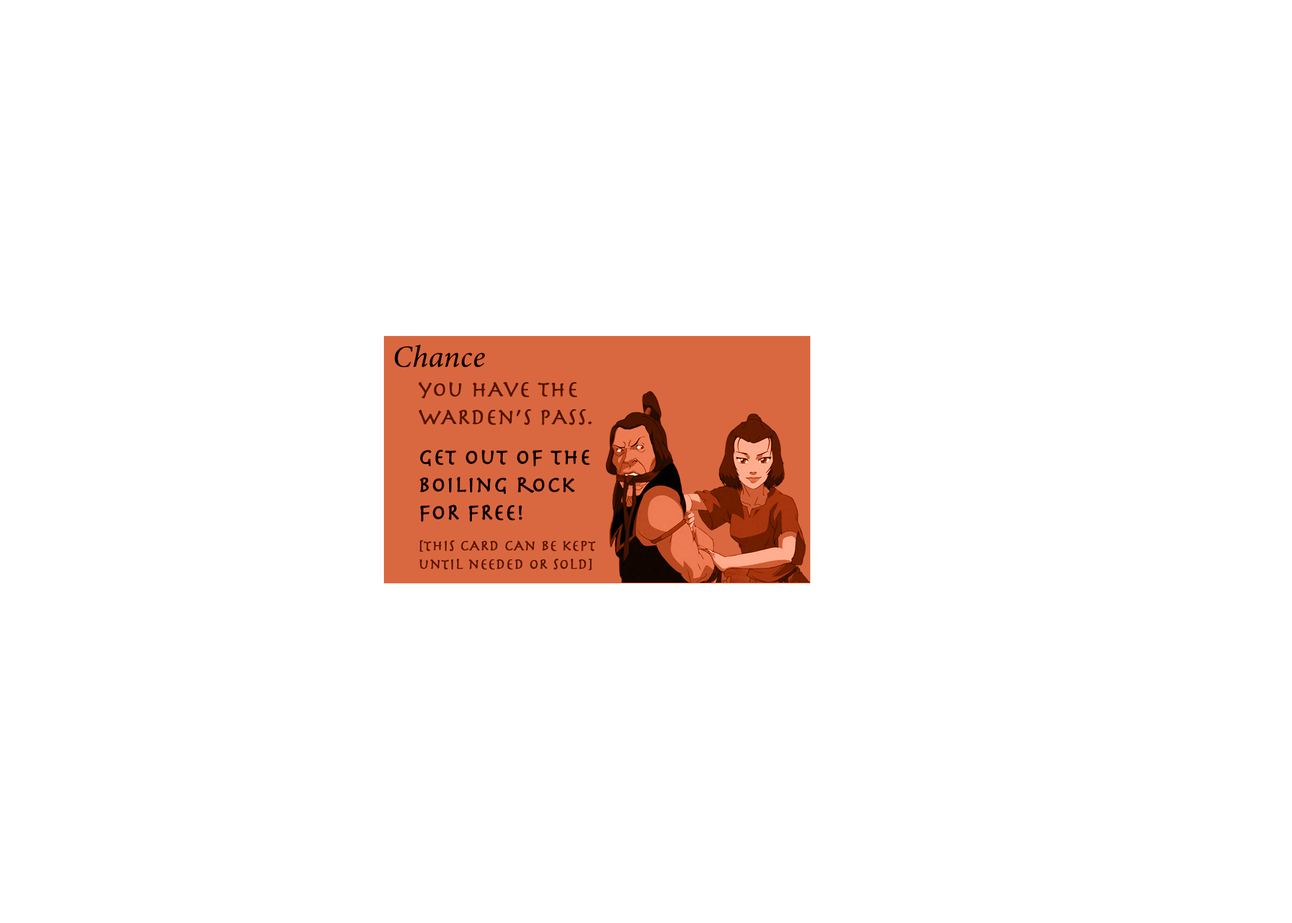
<style>
.page{position:relative;width:1292px;height:923px;background:#ffffff}
.page>*{position:absolute;margin:0}
.t1{font:30.8px "MinionConceptItalic-MediumItalic";color:#000000;font-weight:bold}
.t2{font:15.4px "Herculanum";color:#4e1501;font-weight:bold}
.t3{font:23.1px "Herculanum";color:#4e1501;font-weight:bold}
.t4{font:23.1px "Herculanum";color:#000000;font-weight:bold}
.t5{font:23.1px "Herculanum";color:#351d15;font-weight:bold}
</style>
<div class="page">
<p class="t1" style="left:394px;top:345px;width:91px;height:22px">Chance</p>
<p class="t2" style="left:418px;top:382px;width:178px;height:188px"><span class="t3">you hAve the<br>wARden’s pAss.<br> <br> <br> <br> <br><br></span>[This cARd cAn be kept <br>until needed oR sold]</p>
<p class="t4" style="left:420px;top:450px;width:170px;height:72px"><span class="t5"> <br> <br> <br></span>get out of the<br>boiling rock<br>foR FReE!</p>
</div>
